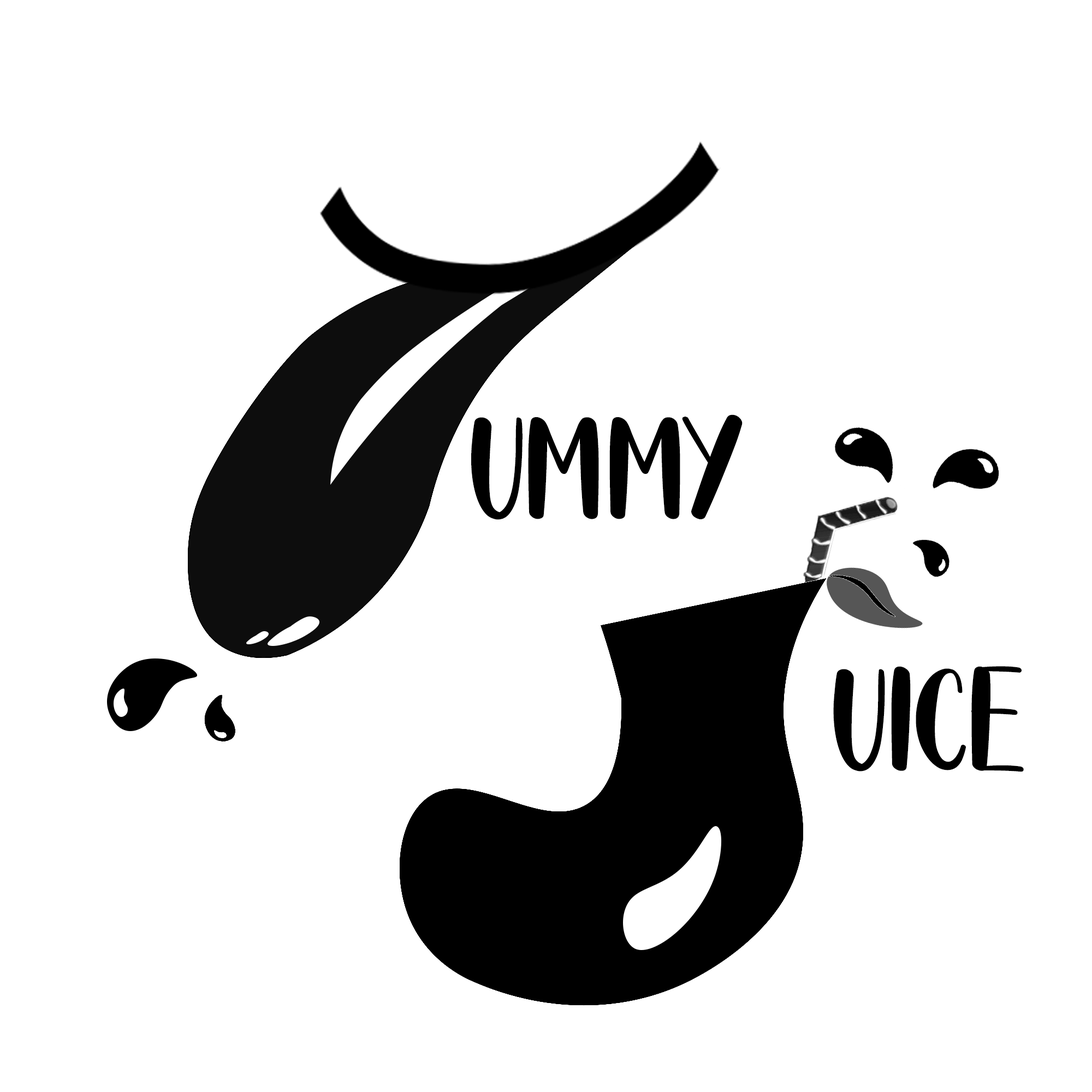
<style>
.page{position:relative;width:1092px;height:1092px;background:#ffffff}
.page>*{position:absolute;margin:0}
.t1{font:109.2px "YogurtSmoothieDemoRegular";color:#000000}
</style>
<div class="page">
<p class="t1" style="left:471px;top:414px;width:272px;height:106px">UMMY</p>
<p class="t1" style="left:833px;top:666px;width:191px;height:106px">UICE</p>
</div>
